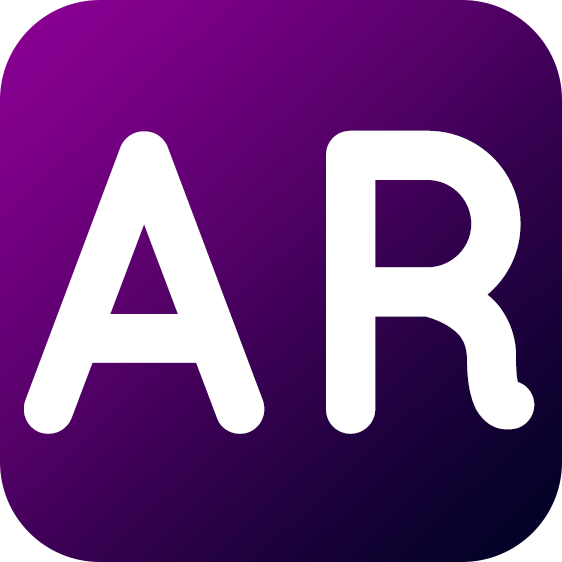
<style>
.page{position:relative;width:562px;height:562px;background:#ffffff}
.page>*{position:absolute;margin:0}
.t1{font:738.7px "Quicksand-Bold";color:#ffffff;font-weight:bold}
</style>
<div class="page">
<p class="t1" style="left:24px;top:130px;width:511px;height:304px">AR</p>
</div>
